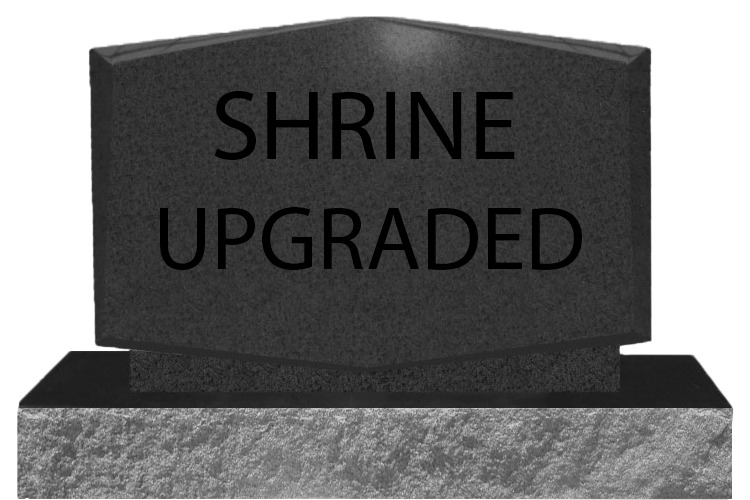
<style>
.page{position:relative;width:750px;height:500px;background:#ffffff}
.page>*{position:absolute;margin:0}
.t1{font:100px "MyriadPro-Regular";color:#000000}
.t2{font:90px "MyriadPro-Regular";color:#000000}
</style>
<div class="page">
<p class="t1" style="left:214px;top:91px;width:301px;height:69px">SHRINE</p>
<p class="t2" style="left:160px;top:207px;width:422px;height:63px">UPGRADED</p>
</div>
